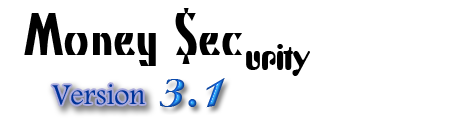
<style>
.page{position:relative;width:463px;height:134px;background:#ffffff}
.page>*{position:absolute;margin:0}
.t1{font:60px "KinoMT";color:#000000}
.t2{font:36px "YellowSubmarine";color:#000000}
.t3{font:48px "Aristocrat"}
.t4{font:30px "TitrBold";color:#003399}
</style>
<div class="page">
<p class="t1" style="left:24px;top:8px;width:218px;height:58px">Money $ec</p>
<p class="t2" style="left:246px;top:44px;width:64px;height:32px">urity</p>
<p class="t3" style="left:159px;top:78px;width:66px;height:30px">3.1</p>
<p class="t4" style="left:52px;top:84px;width:93px;height:21px">Version</p>
</div>
